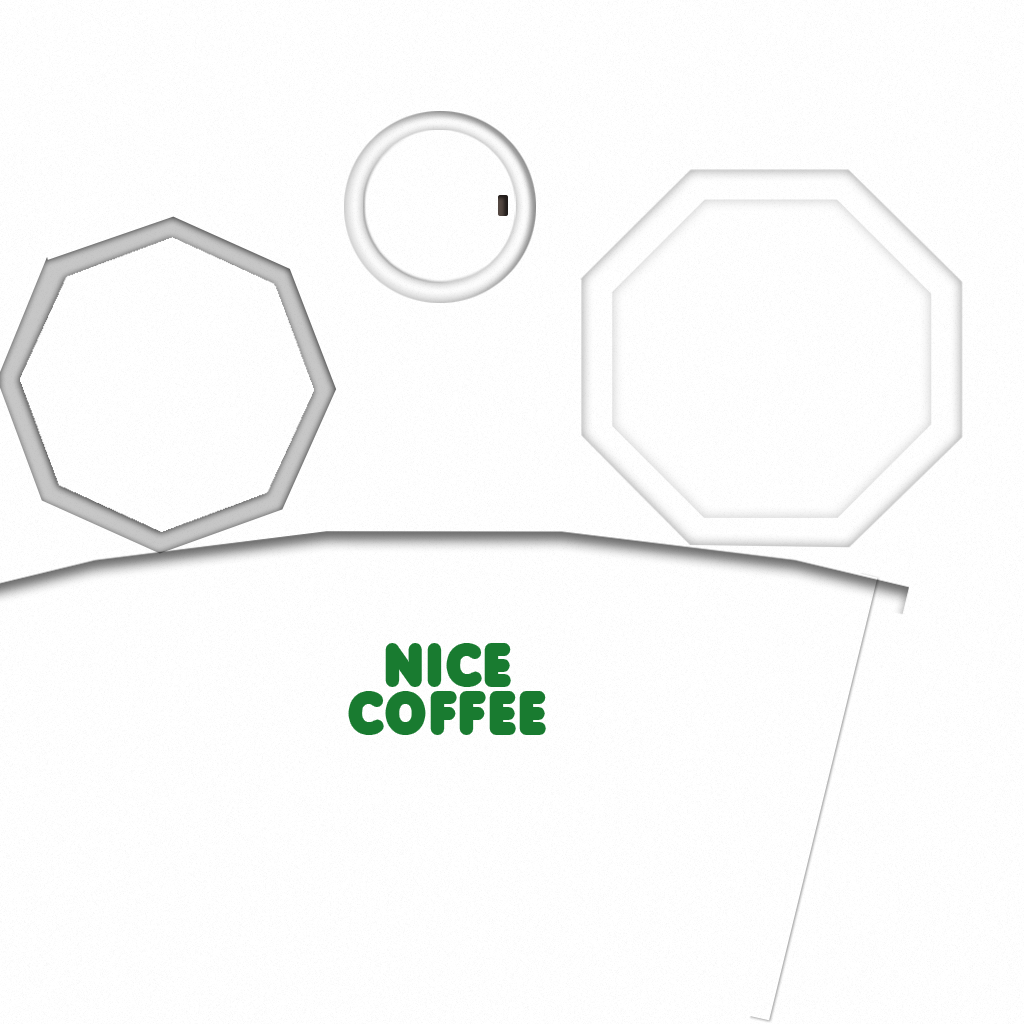
<style>
.page{position:relative;width:1024px;height:1024px;background:#ffffff}
.page>*{position:absolute;margin:0}
.t1{font:49px/47.7px "HowiesFunhouse";letter-spacing:0.08em;color:#197b30}
</style>
<div class="page">
<p class="t1" style="left:352px;top:647px;width:190px;height:84px;text-align:center">NICE<br>COFFEE</p>
</div>
